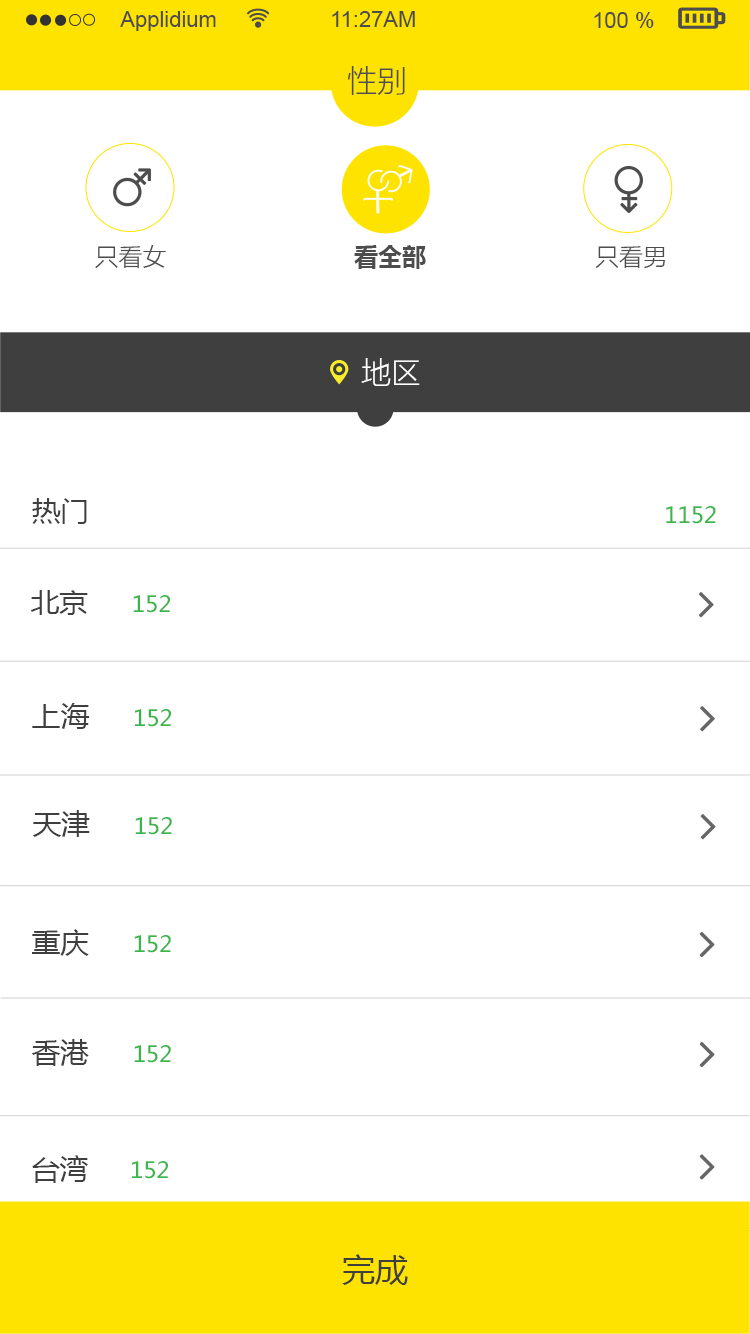
<style>
.page{position:relative;width:750px;height:1334px;background:#ffffff}
.page>*{position:absolute;margin:0}
.t1{font:22px "ArialMT";color:#4d4d4d}
.t2{font:30px "MicrosoftYaHeiLight";color:#4d4d4d}
.t3{font:24px "MicrosoftYaHeiLight";color:#4d4d4d}
.t4{font:24px "MicrosoftYaHei-Bold";color:#4d4d4d}
.t5{font:30px "MicrosoftYaHeiLight";color:#ffffff}
.t6{font:28px "MicrosoftYaHei";color:#3f3f3f}
.t7{font:22px "MicrosoftYaHei";color:#39b54a}
.t8{font:32px "MicrosoftYaHei";color:#3f3f3f}
</style>
<div class="page">
<p class="t1" style="left:120px;top:11px;width:96px;height:20px">Applidium</p>
<p class="t1" style="left:332px;top:11px;width:83px;height:16px">11:27AM</p>
<p class="t1" style="left:594px;top:12px;width:60px;height:16px">100 %</p>
<p class="t2" style="left:347px;top:66px;width:58px;height:29px">性别</p>
<p class="t3" style="left:95px;top:245px;width:71px;height:24px">只看女</p>
<p class="t4" style="left:354px;top:245px;width:72px;height:24px">看全部</p>
<p class="t3" style="left:595px;top:246px;width:70px;height:23px">只看男</p>
<p class="t5" style="left:361px;top:358px;width:59px;height:28px">地区</p>
<p class="t6" style="left:32px;top:498px;width:55px;height:26px">热门</p>
<p class="t7" style="left:666px;top:506px;width:50px;height:18px">1152</p>
<p class="t6" style="left:31px;top:590px;width:57px;height:25px">北京</p>
<p class="t7" style="left:133px;top:595px;width:37px;height:18px">152</p>
<p class="t6" style="left:32px;top:703px;width:58px;height:26px">上海</p>
<p class="t7" style="left:135px;top:709px;width:36px;height:18px">152</p>
<p class="t6" style="left:32px;top:810px;width:58px;height:27px">天津</p>
<p class="t7" style="left:135px;top:817px;width:37px;height:18px">152</p>
<p class="t6" style="left:32px;top:929px;width:57px;height:27px">重庆</p>
<p class="t7" style="left:134px;top:935px;width:37px;height:18px">152</p>
<p class="t6" style="left:31px;top:1039px;width:58px;height:27px">香港</p>
<p class="t7" style="left:134px;top:1045px;width:37px;height:18px">152</p>
<p class="t6" style="left:32px;top:1155px;width:56px;height:28px">台湾</p>
<p class="t7" style="left:132px;top:1161px;width:36px;height:18px">152</p>
<p class="t8" style="left:342px;top:1254px;width:66px;height:31px">完成</p>
</div>
